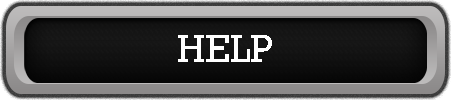
<style>
.page{position:relative;width:451px;height:100px}
.page>*{position:absolute;margin:0}
.t1{font:39.8px "Rockwell";color:#ffffff}
</style>
<div class="page">
<p class="t1" style="left:178px;top:35px;width:94px;height:27px">HELP</p>
</div>
